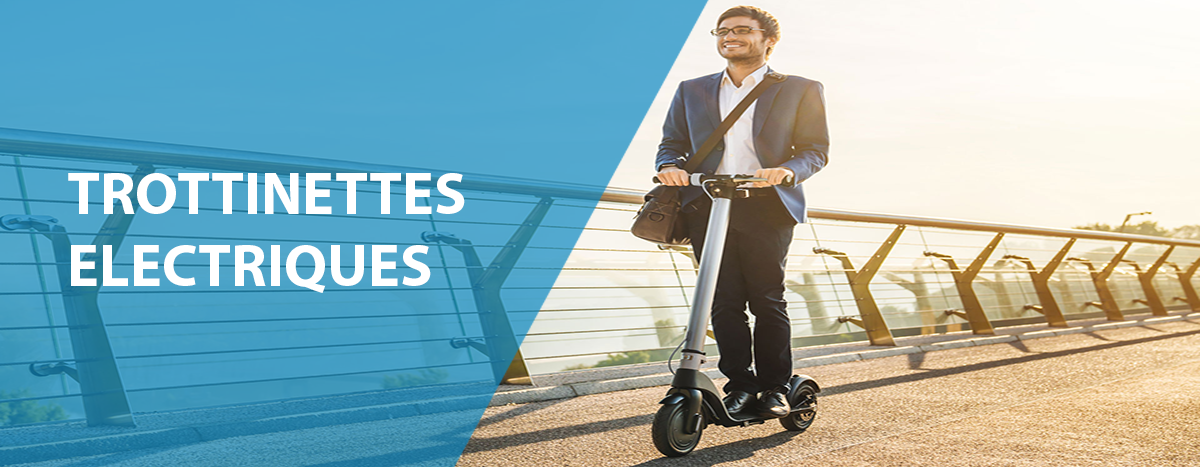
<style>
.page{position:relative;width:1200px;height:467px}
.page>*{position:absolute;margin:0}
.t1{font:60px "MyriadPro-Bold";color:#ffffff}
</style>
<div class="page">
<p class="t1" style="left:68px;top:173px;width:397px;height:120px">TROTTINETTES<br>ELECTRIQUES</p>
</div>
